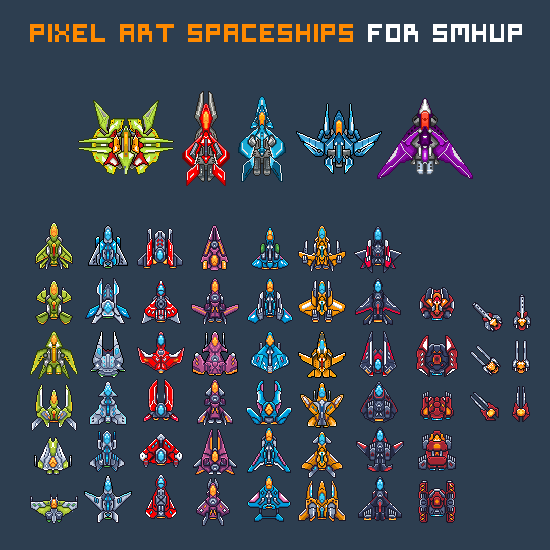
<style>
.page{position:relative;width:550px;height:550px;background:#2d3e50}
.page>*{position:absolute;margin:0}
.t1{font:24px "Symtext";color:#ff8a00}
.t2{font:24px "Symtext";color:#ffffff}
</style>
<div class="page">
<p class="t1" style="left:30px;top:24px;width:492px;height:18px">PIXEL ART SPACESHIPS <span class="t2">FOR SMHUP</span></p>
</div>
